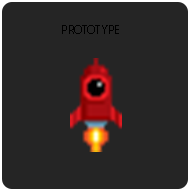
<style>
.page{position:relative;width:192px;height:192px;background:#252525}
.page>*{position:absolute;margin:0}
.t1{font:12px "MyriadPro-Regular";color:#000000}
</style>
<div class="page">
<p class="t1" style="left:62px;top:25px;width:57px;height:9px">PROTOTYPE</p>
</div>
